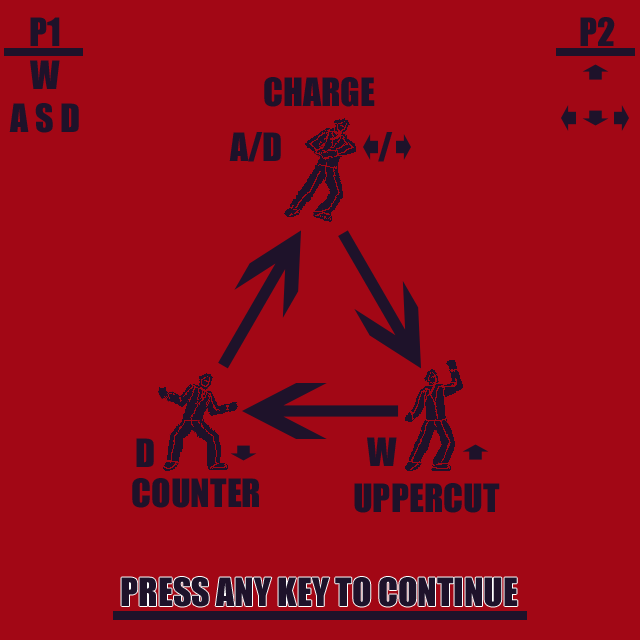
<style>
.page{position:relative;width:640px;height:640px;background:#a20715}
.page>*{position:absolute;margin:0}
.t1{font:36px "Impact";color:#1e122a}
.t2{font:36px "Impact";color:#a20715}
</style>
<div class="page">
<p class="t1" style="left:9px;top:17px;width:70px;height:116px;text-align:center">P1<br>W<br>A S D</p>
<p class="t2" style="left:561px;top:17px;width:70px;height:116px;text-align:center"><span class="t1">P2<br></span>W<br>A S D</p>
<p class="t1" style="left:264px;top:77px;width:111px;height:30px">CHARGE</p>
<p class="t1" style="left:229px;top:132px;width:52px;height:30px">A/D</p>
<p class="t1" style="left:378px;top:132px;width:15px;height:30px">/</p>
<p class="t1" style="left:136px;top:438px;width:18px;height:29px">D</p>
<p class="t1" style="left:367px;top:437px;width:30px;height:29px">W</p>
<p class="t1" style="left:132px;top:478px;width:127px;height:30px">COUNTER</p>
<p class="t1" style="left:354px;top:483px;width:146px;height:30px">UPPERCUT</p>
<p class="t1" style="left:121px;top:577px;width:397px;height:30px">PRESS ANY KEY TO CONTINUE</p>
</div>
